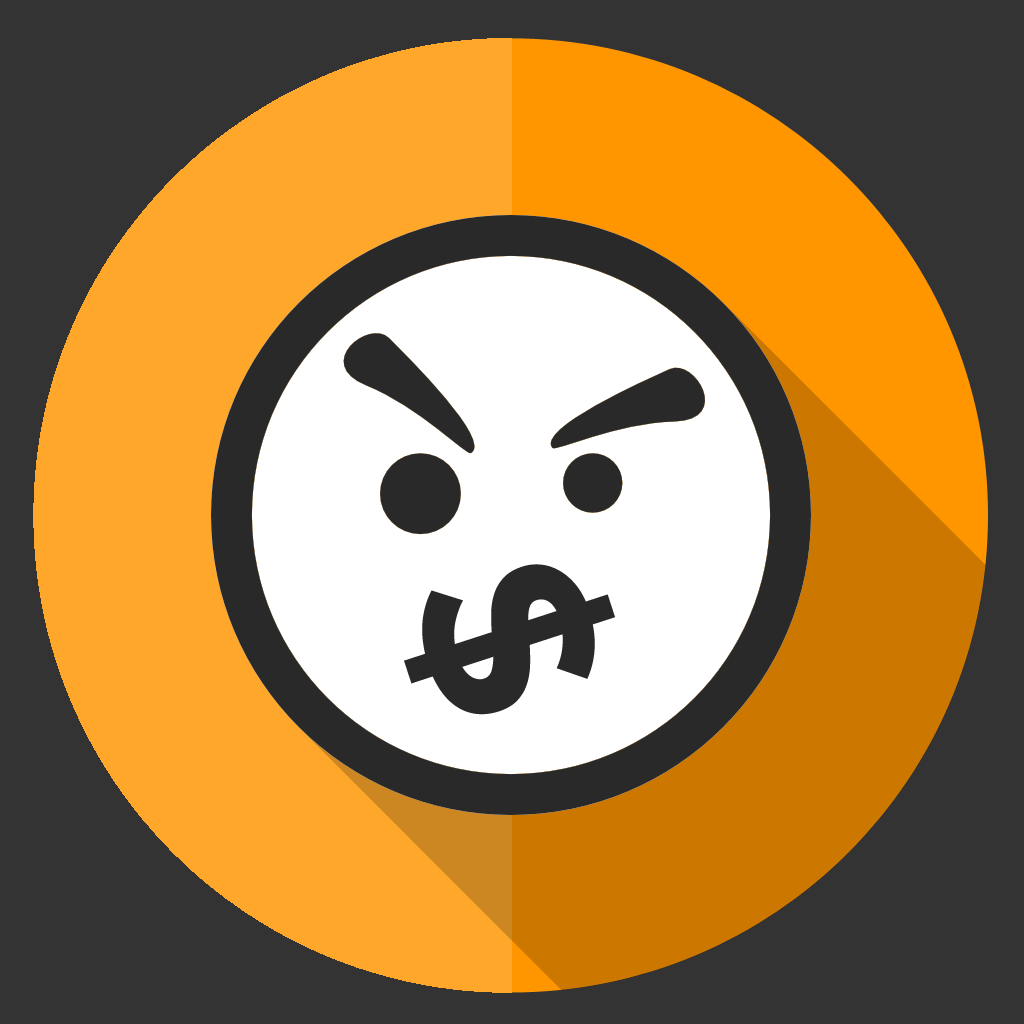
<style>
.page{position:relative;width:1024px;height:1024px;background:#333333}
.page>*{position:absolute;margin:0}
.t1{font:246.6px "ProximaNova-Bold";color:#292929}
</style>
<div class="page">
<p class="t1" style="left:404px;top:564px;width:211px;height:151px;rotate:72deg">$</p>
</div>
